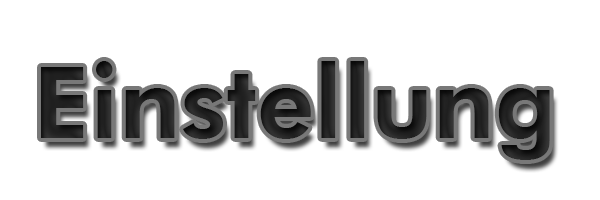
<style>
.page{position:relative;width:600px;height:200px;background:#ffffff}
.page>*{position:absolute;margin:0}
.t1{font:100px "FuturaBT-Heavy";color:#202020}
</style>
<div class="page">
<p class="t1" style="left:41px;top:61px;width:509px;height:99px">Einstellung</p>
</div>
